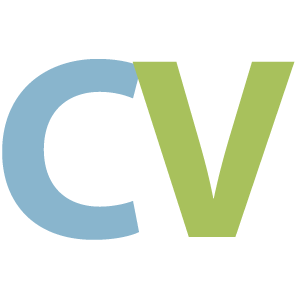
<style>
.page{position:relative;width:300px;height:300px;background:#ffffff}
.page>*{position:absolute;margin:0}
.t1{font:260px "MyriadPro-Bold";letter-spacing:-0.075em;color:#89b5cd}
.t2{font:260px "MyriadPro-Bold";letter-spacing:-0.075em;color:#a8c15c}
</style>
<div class="page">
<p class="t1" style="left:2px;top:59px;width:293px;height:181px">C<span class="t2">V</span></p>
</div>
